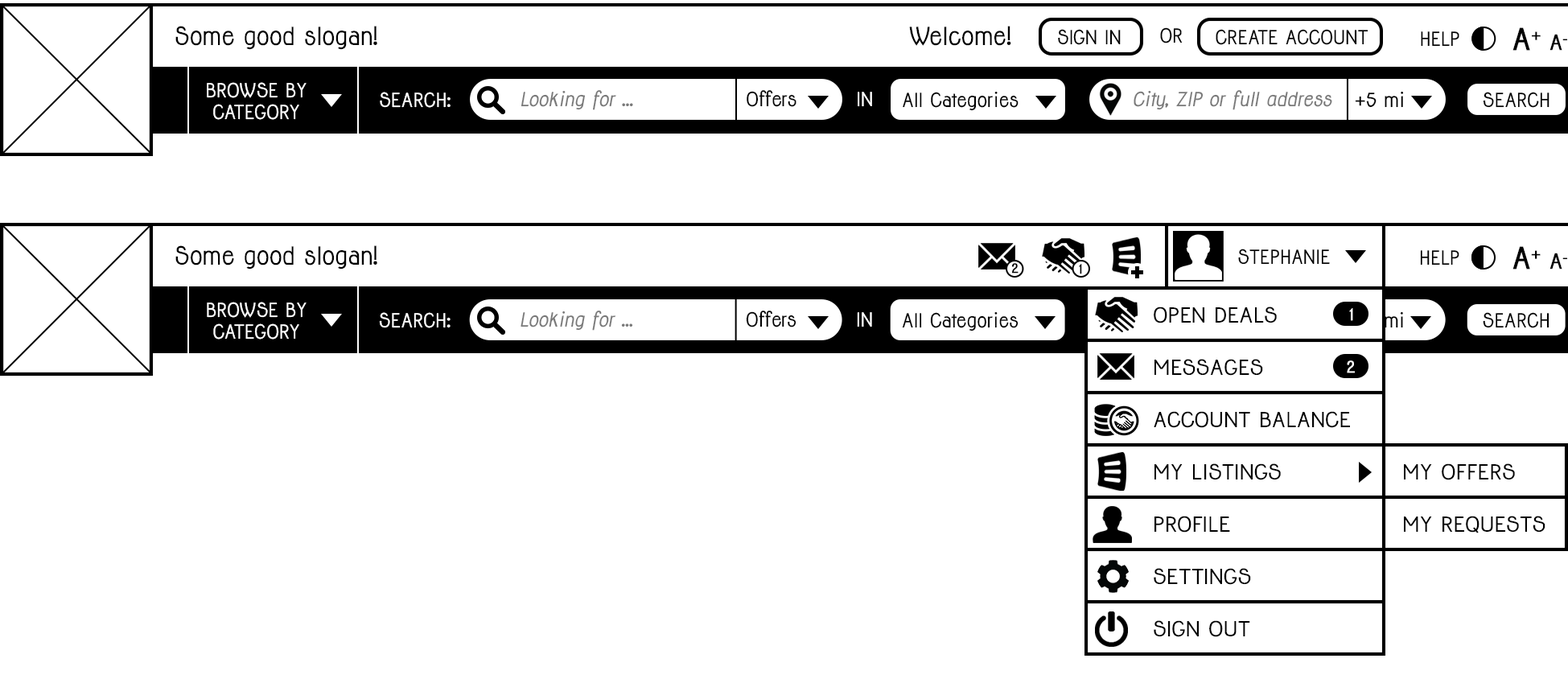
<style>
.page{position:relative;width:1568px;height:679px;background:#ffffff}
.page>*{position:absolute;margin:0}
.t1{font:22.9px "Jolly-Bold";color:#000000}
.t2{font:18px "Jolly-Bold";color:#000000}
.t3{font:27.7px "Jolly-Bold";color:#000000;font-weight:bold}
.t4{font:17.9px "Jolly-Bold";color:#000000}
.t5{font:19.5px "Jolly-Bold";color:#000000;font-weight:bold}
.t6{font:18px "Jolly-Bold";color:#ffffff}
.t7{font:18px "Jolly-BoldItalic";color:#797979}
.t8{font:27.8px "Jolly-Bold";color:#000000;font-weight:bold}
.t9{font:19.6px "Jolly-Bold";color:#000000;font-weight:bold}
.t10{font:11.8px "Jolly-Bold";color:#000000;font-weight:bold;scale:1.1 1}
.t11{font:11.8px "Jolly-Bold";color:#000000;font-weight:bold;scale:1.06 1}
.t12{font:19.1px/52.2px "Jolly-Bold";color:#000000;scale:1.11 1}
</style>
<div class="page">
<p class="t1" style="left:175px;top:26px;width:202px;height:24px">Some good slogan!</p>
<p class="t1" style="left:909px;top:26px;width:102px;height:20px">Welcome!</p>
<p class="t2" style="left:1058px;top:29px;width:63px;height:16px">SIGN IN</p>
<p class="t2" style="left:1160px;top:27px;width:23px;height:16px">OR</p>
<p class="t2" style="left:1216px;top:29px;width:152px;height:16px">CREATE ACCOUNT</p>
<p class="t3" style="left:1512px;top:27px;width:29px;height:24px">A+</p>
<p class="t4" style="left:1421px;top:31px;width:38px;height:16px">HELP</p>
<p class="t5" style="left:1549px;top:34px;width:19px;height:17px">A-</p>
<p class="t6" style="left:207px;top:82px;width:100px;height:38px;text-align:center">BROWSE BY<br>CATEGORY</p>
<p class="t6" style="left:380px;top:92px;width:71px;height:16px">SEARCH:</p>
<p class="t7" style="left:521px;top:90px;width:112px;height:20px">Looking for ...</p>
<p class="t2" style="left:747px;top:90px;width:49px;height:17px">Offers</p>
<p class="t6" style="left:858px;top:92px;width:14px;height:15px">IN</p>
<p class="t2" style="left:903px;top:92px;width:116px;height:19px">All Categories</p>
<p class="t7" style="left:1134px;top:90px;width:198px;height:20px">City, ZIP or full address</p>
<p class="t2" style="left:1355px;top:91px;width:49px;height:17px">+5 mi</p>
<p class="t2" style="left:1483px;top:92px;width:66px;height:16px">SEARCH</p>
<p class="t1" style="left:175px;top:245px;width:202px;height:25px">Some good slogan!</p>
<p class="t4" style="left:1238px;top:249px;width:92px;height:16px">STEPHANIE</p>
<p class="t2" style="left:1420px;top:250px;width:39px;height:15px">HELP</p>
<p class="t8" style="left:1512px;top:246px;width:29px;height:24px">A+</p>
<p class="t9" style="left:1549px;top:253px;width:19px;height:17px">A-</p>
<p class="t10" style="left:1011px;top:263px;width:8px;height:11px">2</p>
<p class="t11" style="left:1079px;top:264px;width:3px;height:10px">1</p>
<p class="t6" style="left:207px;top:302px;width:100px;height:38px;text-align:center">BROWSE BY<br>CATEGORY</p>
<p class="t6" style="left:379px;top:312px;width:72px;height:16px">SEARCH:</p>
<p class="t7" style="left:521px;top:311px;width:112px;height:20px">Looking for ...</p>
<p class="t2" style="left:746px;top:311px;width:50px;height:16px">Offers</p>
<p class="t6" style="left:857px;top:312px;width:15px;height:15px">IN</p>
<p class="t2" style="left:902px;top:312px;width:117px;height:19px">All Categories</p>
<p class="t12" style="left:1154px;top:307px;width:196px;height:330px">OPEN DEALS<br>MESSAGES<br>ACCOUNT BALANCE<br>MY LISTINGS<br>PROFILE<br>SETTINGS<br>SIGN OUT</p>
<p class="t2" style="left:1483px;top:312px;width:66px;height:16px">SEARCH</p>
<p class="t12" style="left:1404px;top:463px;width:141px;height:70px">MY OFFERS<br>MY REQUESTS</p>
</div>
